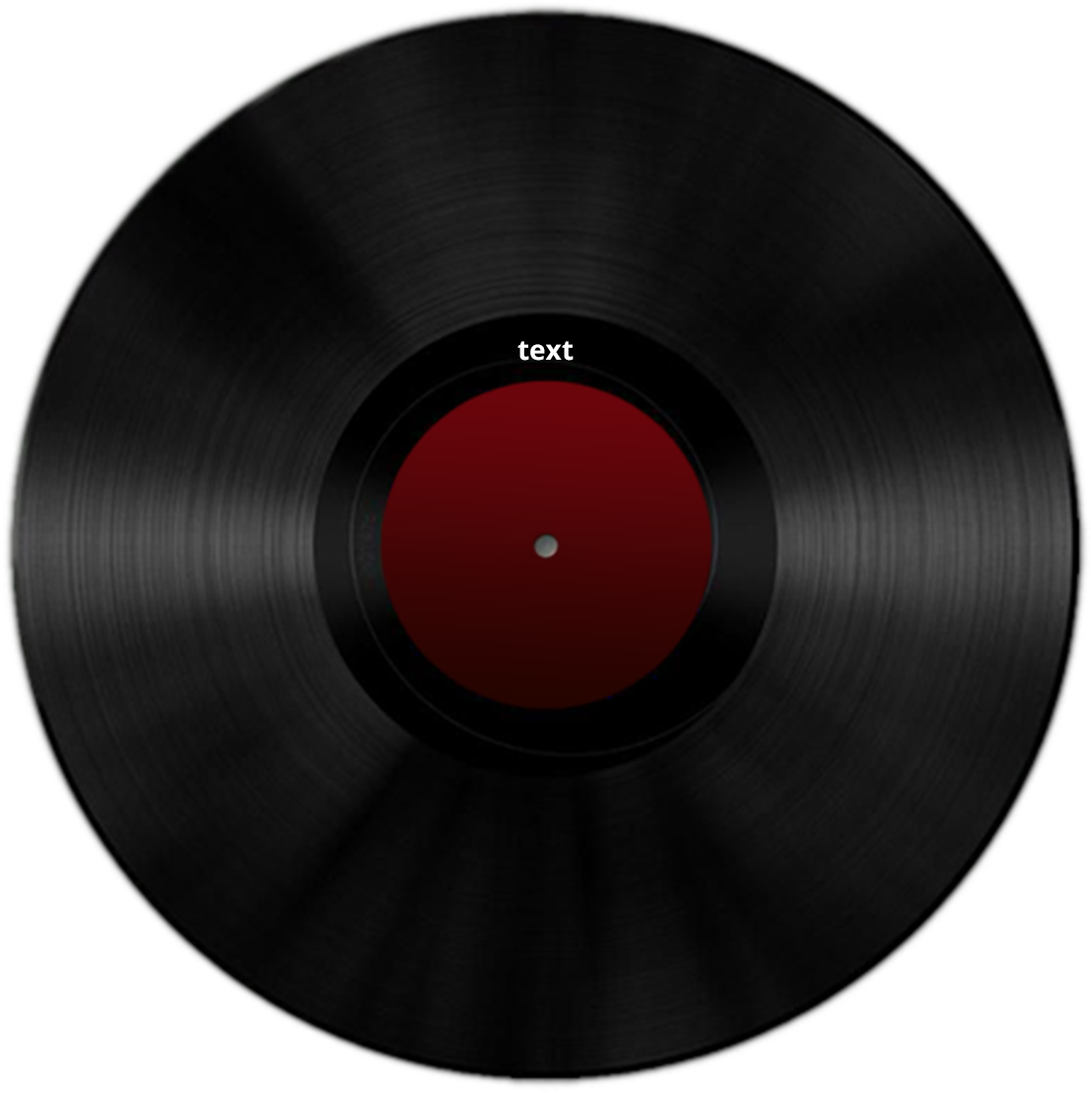
<style>
.page{position:relative;width:1091px;height:1093px;background:#ffffff}
.page>*{position:absolute;margin:0}
.t1{font:27.5px "OpenSans-Bold";color:#ffffff}
</style>
<div class="page">
<p class="t1" style="left:517px;top:341px;width:56px;height:20px">text</p>
</div>
